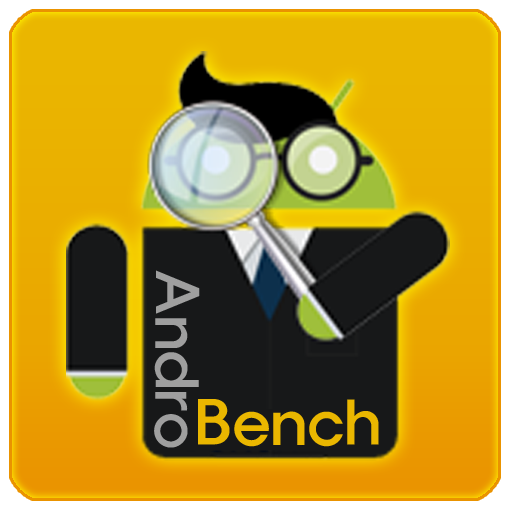
<style>
.page{position:relative;width:512px;height:512px}
.page>*{position:absolute;margin:0}
.t1{font:60.8px "HaanYHeadM";color:#9e9e9e}
.t2{font:63.5px "HaanYHeadM";color:#eab700}
</style>
<div class="page">
<p class="t1" style="left:154px;top:270px;width:46px;height:178px;rotate:90deg">Andro</p>
<p class="t2" style="left:198px;top:399px;width:181px;height:48px">Bench</p>
</div>
